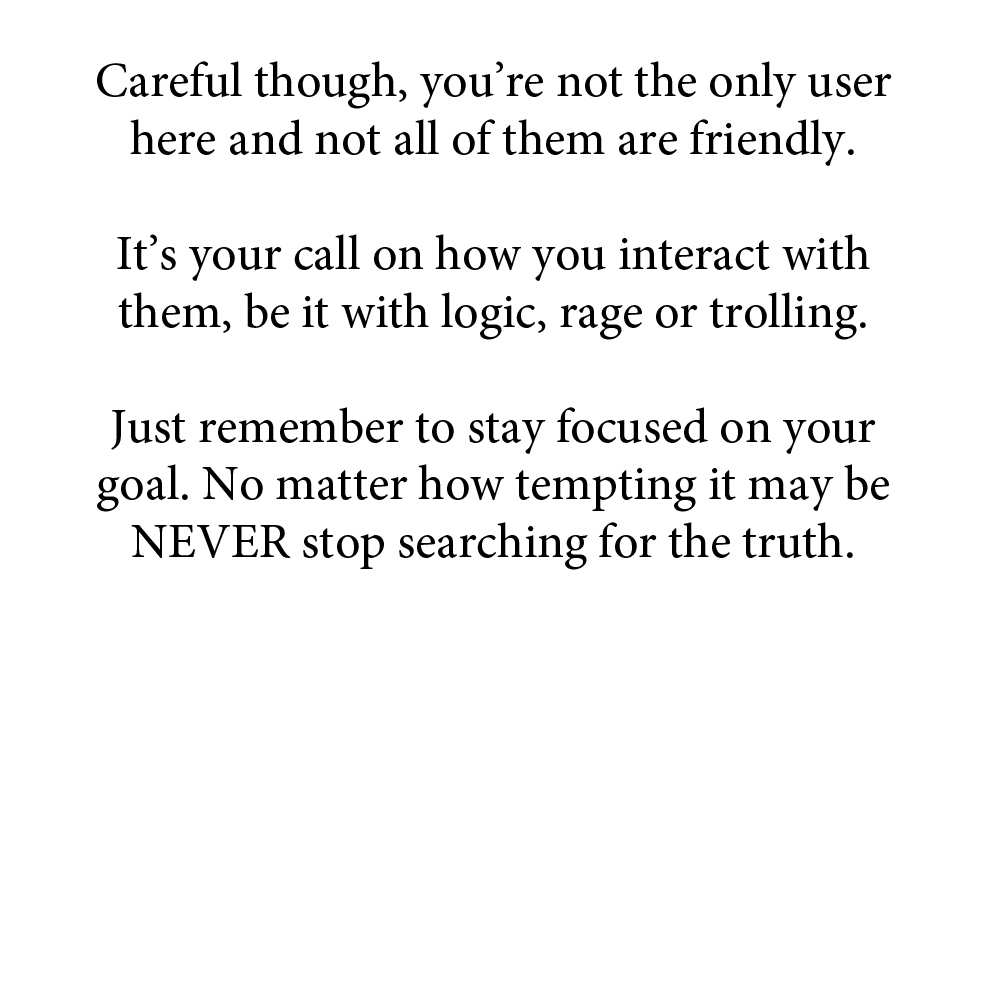
<style>
.page{position:relative;width:1000px;height:1000px;background:#ffffff}
.page>*{position:absolute;margin:0}
.t1{font:48px "AdobeHebrew-Regular";color:#000000}
</style>
<div class="page">
<p class="t1" style="left:97px;top:61px;width:795px;height:509px;text-align:center">Careful though, you’re not the only user here and not all of them are friendly. <br><br>It’s your call on how you interact with them, be it with logic, rage or trolling. <br><br>Just remember to stay focused on your goal. No matter how tempting it may be NEVER stop searching for the truth.</p>
</div>
